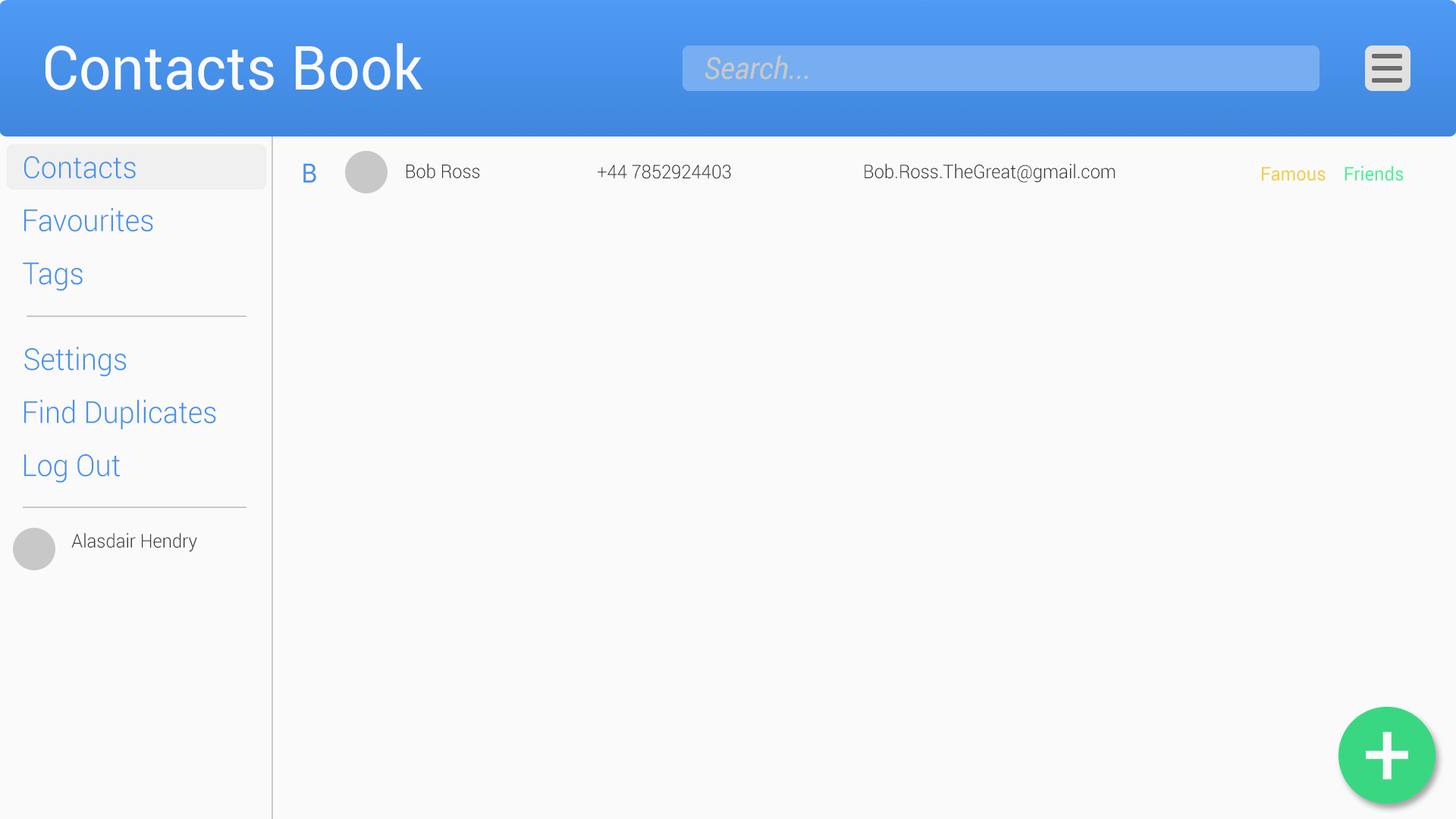
<style>
.page{position:relative;width:1456px;height:819px;background:#fafafa}
.page>*{position:absolute;margin:0}
.t1{font:60.7px "Roboto-Regular";color:#fafafa;scale:0.95 1}
.t2{font:30.3px "Roboto-Italic";color:#c8c8c8;scale:0.95 1}
.t3{font:30.3px "Roboto-Light";color:#4891ea;scale:0.95 1}
.t4{font:26.5px "Roboto-Regular";color:#4891ea;scale:0.95 1}
.t5{font:19px "Roboto-Light";color:#353535;scale:0.95 1}
.t6{font:19px "Roboto-Regular";color:#51ef9b;scale:0.95 1}
.t7{font:19px "Roboto-Regular";color:#efcf51;scale:0.95 1}
.t8{font:91px "Roboto-Regular";color:#fafafa;scale:0.95 1}
</style>
<div class="page">
<p class="t1" style="left:45px;top:43px;width:378px;height:47px">Contacts Book</p>
<p class="t2" style="left:705px;top:55px;width:103px;height:25px">Search...</p>
<p class="t3" style="left:24px;top:156px;width:112px;height:23px">Contacts</p>
<p class="t4" style="left:303px;top:163px;width:13px;height:20px">B</p>
<p class="t5" style="left:406px;top:163px;width:74px;height:15px">Bob Ross</p>
<p class="t5" style="left:598px;top:165px;width:133px;height:14px">+44 7852924403</p>
<p class="t5" style="left:864px;top:164px;width:251px;height:19px">Bob.Ross.TheGreat@gmail.com</p>
<p class="t6" style="left:1262px;top:165px;width:142px;height:16px"><span class="t7">Famous    </span>Friends</p>
<p class="t3" style="left:24px;top:208px;width:129px;height:24px">Favourites</p>
<p class="t3" style="left:23px;top:262px;width:60px;height:29px">Tags</p>
<p class="t3" style="left:24px;top:347px;width:103px;height:30px">Settings</p>
<p class="t3" style="left:24px;top:400px;width:192px;height:29px">Find Duplicates</p>
<p class="t3" style="left:24px;top:454px;width:97px;height:29px">Log Out</p>
<p class="t5" style="left:71px;top:533px;width:126px;height:19px">Alasdair Hendry</p>
<p class="t8" style="left:1366px;top:732px;width:42px;height:48px">+</p>
</div>
